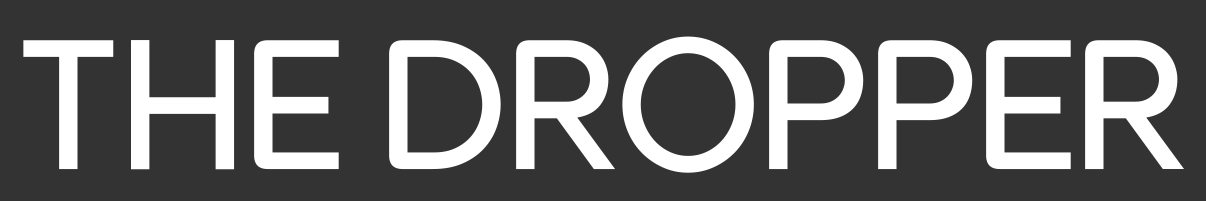
<style>
.page{position:relative;width:1206px;height:201px;background:#333333}
.page>*{position:absolute;margin:0}
.t1{font:183.9px "Utendo-Regular";color:#ffffff}
</style>
<div class="page">
<p class="t1" style="left:23px;top:36px;width:1161px;height:137px">THE DROPPER</p>
</div>
